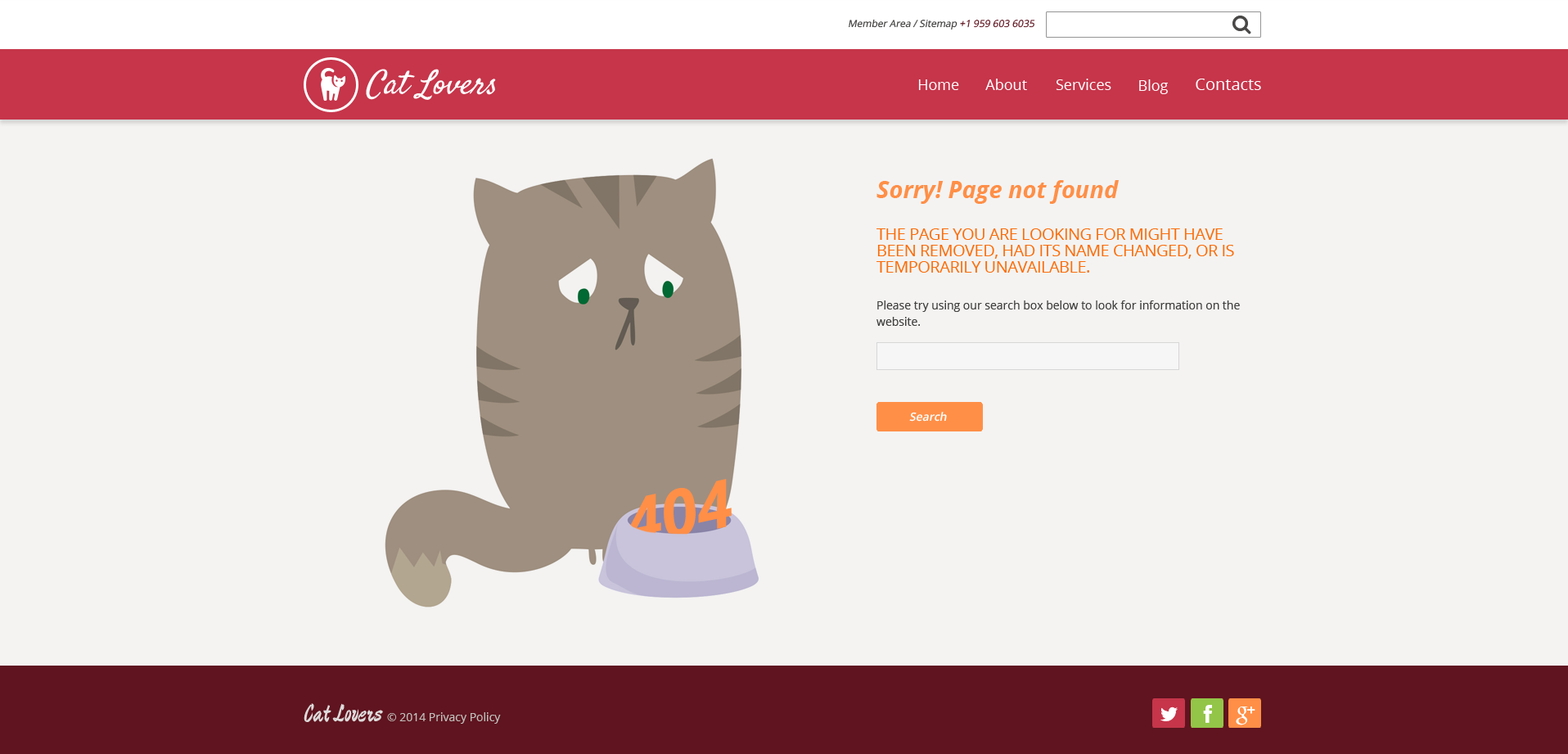
<style>
.page{position:relative;width:1568px;height:754px;background:#f4f3f2}
.page>*{position:absolute;margin:0}
.t1{font:9.8px "OpenSans";color:#3c3b3a;font-style:italic}
.t2{font:9.8px "OpenSans";color:#5f141f;font-style:italic}
.t3{font:32.7px "Satisfy";color:#ffffff;font-style:italic}
.t4{font:14.7px "OpenSans";color:#ffffff}
.t5{font:16.4px "OpenSans";color:#ffffff}
.t6{font:23.7px "OpenSans-BoldItalic";color:#ff8f47}
.t7{font:16.4px/16.4px "OpenSans";letter-spacing:-0.025em;color:#fb6d09;text-transform:uppercase}
.t8{font:11.5px/16.4px "OpenSans";color:#40403f}
.t9{font:11.5px "OpenSans-Semibold";color:#ffffff;font-style:italic}
.t10{font:11.5px "OpenSans";color:#c0c0bc}
.t11{font:11.5px "OpenSans";color:#c0c0bc;font-style:italic}
.t12{font:24.6px "Devonshire-Regular";color:#dddada;font-style:italic}
</style>
<div class="page">
<p class="t1" style="left:849px;top:19px;width:186px;height:11px">Member Area / Sitemap <span class="t2">+1 959 603 6035</span></p>
<p class="t3" style="left:366px;top:69px;width:130px;height:31px">Cat Lovers</p>
<p class="t4" style="left:918px;top:79px;width:41px;height:11px">Home</p>
<p class="t4" style="left:985px;top:79px;width:42px;height:11px">About</p>
<p class="t4" style="left:1056px;top:79px;width:55px;height:11px">Services</p>
<p class="t4" style="left:1139px;top:79px;width:29px;height:15px">Blog</p>
<p class="t5" style="left:1196px;top:79px;width:65px;height:11px">Contacts</p>
<p class="t6" style="left:876px;top:180px;width:243px;height:24px">Sorry! Page not found</p>
<p class="t7" style="left:876px;top:228px;width:358px;height:45px">The page you are looking for might have been removed, had its name changed, or is temporarily unavailable.</p>
<p class="t8" style="left:876px;top:300px;width:364px;height:26px">Please try using our search box below to look for information on the website.</p>
<p class="t9" style="left:909px;top:412px;width:38px;height:9px">Search</p>
<p class="t10" style="left:304px;top:703px;width:197px;height:20px"><span class="t11"><br></span><span class="t12">Cat Lovers</span>  © 2014 Privacy Policy</p>
</div>
